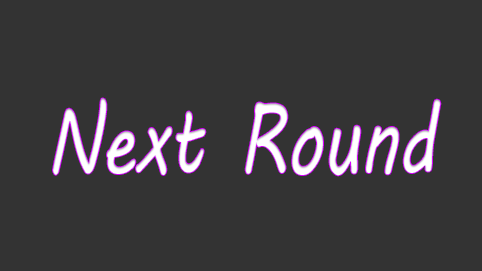
<style>
.page{position:relative;width:482px;height:271px;background:#333333}
.page>*{position:absolute;margin:0}
.t1{font:95.4px "MVBoli";color:#ffffff;scale:0.72 1}
</style>
<div class="page">
<p class="t1" style="left:53px;top:98px;width:388px;height:78px">Next Round</p>
</div>
